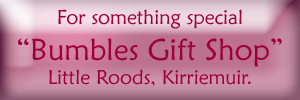
<style>
.page{position:relative;width:300px;height:100px}
.page>*{position:absolute;margin:0}
.t1{font:19.9px "MaiandraGD-Regular";color:#9e0039}
.t2{font:29.9px "MaiandraGD-Regular";color:#9e0039}
</style>
<div class="page">
<p class="t1" style="left:18px;top:9px;width:264px;height:77px;text-align:center">For something special<br><span class="t2">“Bumbles Gift Shop”<br></span>Little Roods, Kirriemuir.</p>
</div>
